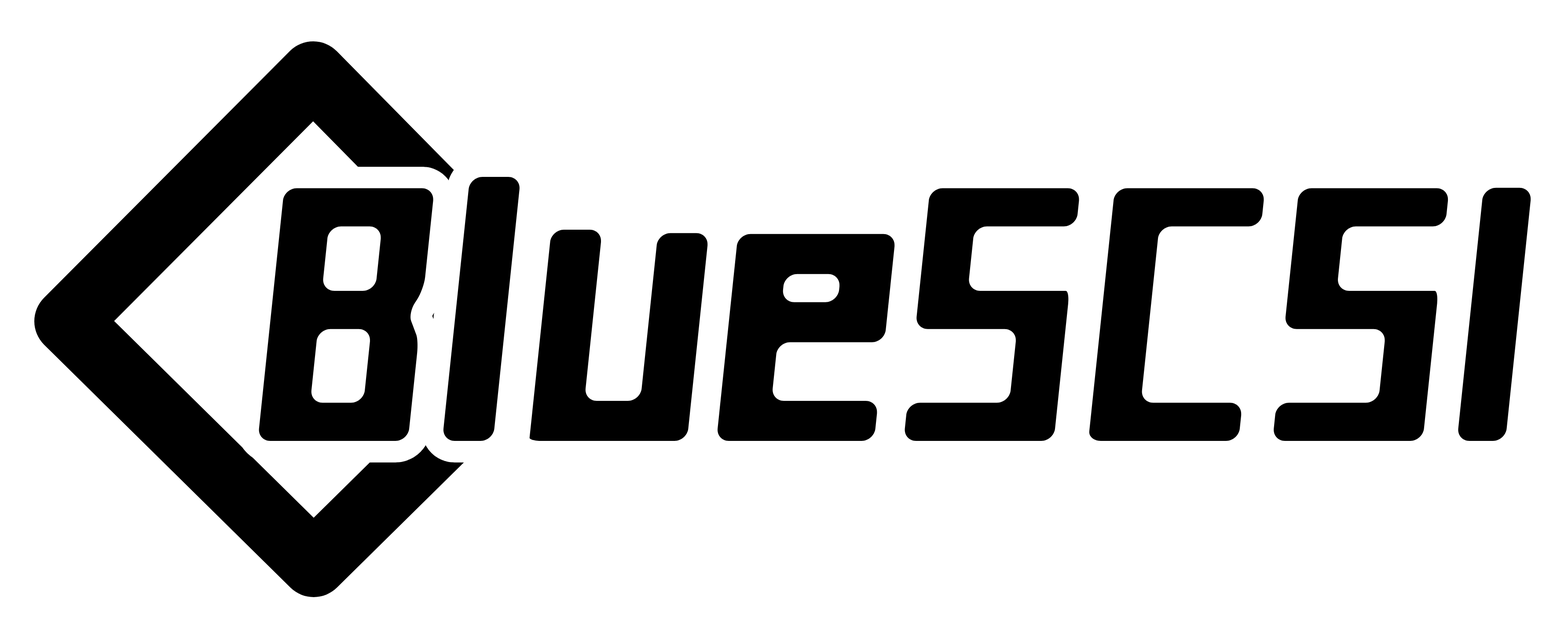
<style>
.page{position:relative;width:1568px;height:631px;background:#ffffff}
.page>*{position:absolute;margin:0}
.t1{font:393.3px "HeartbitBold";color:#000000}
</style>
<div class="page">
<p class="t1" style="left:259px;top:177px;width:1272px;height:264px">BlueSCSI</p>
</div>
